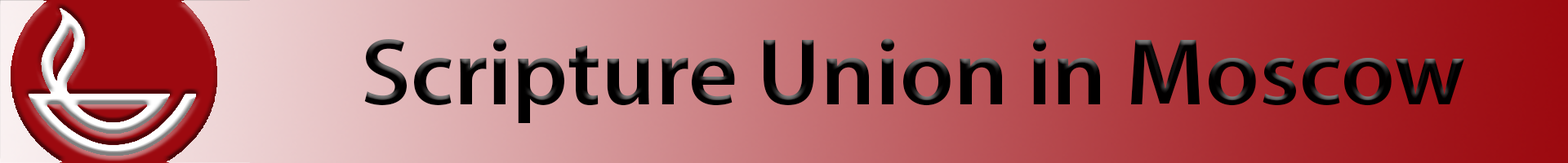
<style>
.page{position:relative;width:1568px;height:163px}
.page>*{position:absolute;margin:0}
.t1{font:95.3px "MyriadPro-Semibold";color:#010000}
</style>
<div class="page">
<p class="t1" style="left:364px;top:38px;width:1100px;height:85px">Scripture Union in Moscow</p>
</div>
